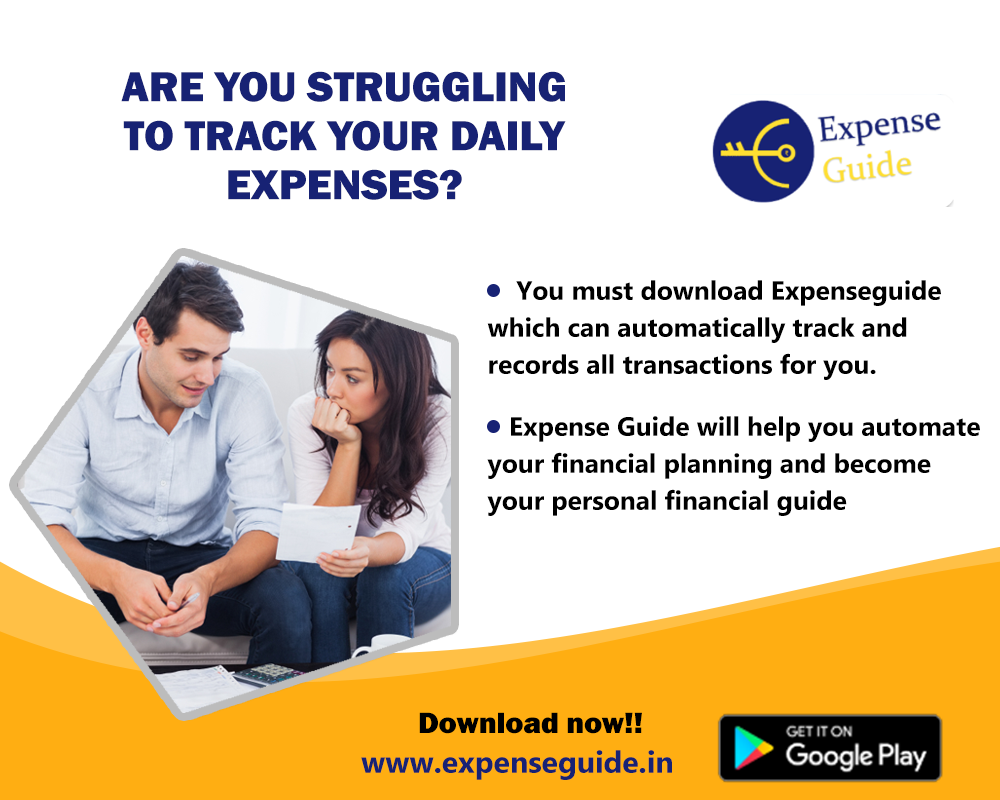
<style>
.page{position:relative;width:1000px;height:800px;background:#ffffff}
.page>*{position:absolute;margin:0}
.t1{font:43.5px/49px "FranklinGothic-Heavy";letter-spacing:-0.005em;color:#172274;text-transform:uppercase}
.t2{font:26.6px/37px "Gadugi-Bold";letter-spacing:-0.005em;color:#000000}
.t3{font:26.6px/37.1px "Gadugi-Bold";letter-spacing:-0.005em;color:#000000}
.t4{font:30.5px "FranklinGothic-Heavy";letter-spacing:-0.005em;color:#000000}
.t5{font:30.5px "Gadugi-Bold";letter-spacing:-0.005em;color:#172274}
</style>
<div class="page">
<p class="t1" style="left:121px;top:71px;width:445px;height:129px;text-align:center">Are you struggling to track your daily expenses?</p>
<p class="t2" style="left:487px;top:280px;width:454px;height:100px">You must download Expenseguide which can automatically track and     records all transactions for you.</p>
<p class="t3" style="left:487px;top:416px;width:493px;height:100px">Expense Guide will help you automate your financial planning and become your personal financial guide</p>
<p class="t4" style="left:419px;top:712px;width:223px;height:22px">Download now!!</p>
<p class="t5" style="left:361px;top:750px;width:311px;height:30px">www.expenseguide.in</p>
</div>
